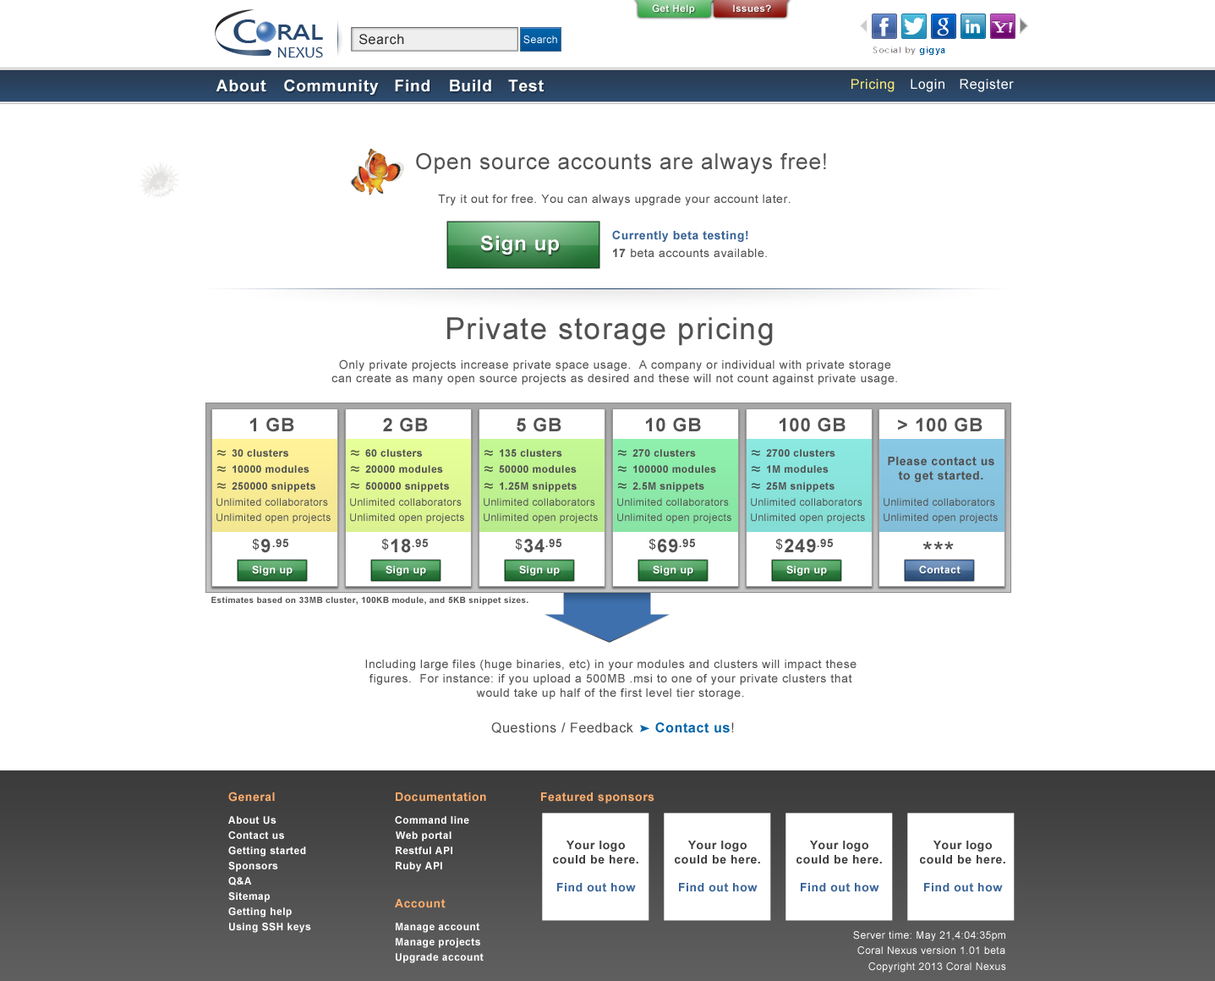
<style>
.page{position:relative;width:1215px;height:981px;background:#ffffff}
.page>*{position:absolute;margin:0}
.t1{font:9.8px "Arial-BoldMT";letter-spacing:0.04em;color:#ffffff}
.t2{font:30.5px "MicrosoftJhengHeiBold";letter-spacing:-0.02em;color:#294970;scale:1.24 1}
.t3{font:20.3px "MicrosoftJhengHeiBold";letter-spacing:-0.02em;color:#294970;scale:1.24 1}
.t4{font:13.5px "ArialMT";letter-spacing:0.04em;color:#2b2b2b}
.t5{font:10.1px "ArialMT";letter-spacing:0.04em;color:#ffffff}
.t6{font:15.8px "Candara";color:#294970}
.t7{font:16.3px "Arial-BoldMT";letter-spacing:0.04em;color:#ffffff}
.t8{font:13.5px "ArialMT";letter-spacing:0.04em;color:#ffed75}
.t9{font:13.5px "ArialMT";letter-spacing:0.04em;color:#ffffff}
.t10{font:22px "ArialMT";letter-spacing:0.04em;color:#515151}
.t11{font:11.8px "ArialMT";letter-spacing:0.04em;color:#515151}
.t12{font:11.8px "Arial-BoldMT";letter-spacing:0.04em;color:#396496}
.t13{font:20.3px "Arial-BoldMT";letter-spacing:0.04em;color:#ffffff}
.t14{font:11.8px "Arial-BoldMT";letter-spacing:0.04em;color:#515151}
.t15{font:30.4px "ArialMT";letter-spacing:0.04em;color:#515151}
.t16{font:18.6px "Arial-BoldMT";letter-spacing:0.04em;color:#515151}
.t17{font:10.1px "Arial-BoldMT";letter-spacing:0.04em;color:#515151}
.t18{font:10.1px "ArialMT";letter-spacing:0.04em;color:#515151}
.t19{font:13.5px "ArialMT";letter-spacing:0.04em;color:#515151}
.t20{font:11.3px "Arial-BoldMT";letter-spacing:0.04em;color:#515151}
.t21{font:25.4px "ArialMT";letter-spacing:0.04em;color:#515151}
.t22{font:10.4px "Arial-BoldMT";letter-spacing:0.04em;color:#ffffff}
.t23{font:8.5px "Arial-BoldMT";letter-spacing:0.04em;color:#555555}
.t24{font:13.5px "Arial-BoldMT";letter-spacing:0.04em;color:#0264a8}
.t25{font:11.8px "Arial-BoldMT";letter-spacing:0.04em;color:#ffad6c}
.t26{font:11.8px "Arial-BoldMT";letter-spacing:0.04em;color:#ffad6b}
.t27{font:10.1px "Arial-BoldMT";letter-spacing:0.04em;color:#ffffff}
.t28{font:11.8px "Arial-BoldMT";letter-spacing:0.04em;color:#404040}
.t29{font:11.8px "Arial-BoldMT";letter-spacing:0.04em;color:#3a6599}
</style>
<div class="page">
<p class="t1" style="left:652px;top:4px;width:43px;height:10px">Get Help</p>
<p class="t1" style="left:733px;top:4px;width:38px;height:8px">Issues?</p>
<p class="t2" style="left:233px;top:19px;width:23px;height:24px">C</p>
<p class="t3" style="left:278px;top:25px;width:45px;height:15px">RAL</p>
<p class="t4" style="left:359px;top:34px;width:45px;height:11px">Search</p>
<p class="t5" style="left:524px;top:36px;width:33px;height:8px">Search</p>
<p class="t6" style="left:277px;top:47px;width:46px;height:11px">NEXUS</p>
<p class="t7" style="left:216px;top:80px;width:50px;height:12px">About</p>
<p class="t7" style="left:284px;top:80px;width:95px;height:15px">Community</p>
<p class="t7" style="left:395px;top:80px;width:35px;height:12px">Find</p>
<p class="t7" style="left:450px;top:80px;width:41px;height:12px">Build</p>
<p class="t7" style="left:508px;top:80px;width:36px;height:12px">Test</p>
<p class="t8" style="left:852px;top:79px;width:43px;height:13px">Pricing</p>
<p class="t9" style="left:911px;top:79px;width:34px;height:13px">Login</p>
<p class="t9" style="left:960px;top:79px;width:54px;height:13px">Register</p>
<p class="t10" style="left:416px;top:153px;width:410px;height:21px">Open source accounts are always free!</p>
<p class="t11" style="left:438px;top:195px;width:353px;height:11px">Try it out for free. You can always upgrade your account later.</p>
<p class="t12" style="left:612px;top:230px;width:137px;height:12px">Currently beta testing!</p>
<p class="t13" style="left:480px;top:235px;width:79px;height:20px">Sign up</p>
<p class="t11" style="left:613px;top:249px;width:154px;height:8px"><span class="t14">17</span> beta accounts available.</p>
<p class="t15" style="left:447px;top:317px;width:326px;height:29px">Private storage pricing</p>
<p class="t11" style="left:332px;top:359px;width:565px;height:26px;text-align:center">Only private projects increase private space usage.  A company or individual with private storage can create as many open source projects as desired and these will not count against private usage.</p>
<p class="t16" style="left:250px;top:418px;width:44px;height:14px">1 GB</p>
<p class="t16" style="left:383px;top:418px;width:45px;height:14px">2 GB</p>
<p class="t16" style="left:517px;top:418px;width:45px;height:14px">5 GB</p>
<p class="t16" style="left:646px;top:418px;width:55px;height:14px">10 GB</p>
<p class="t16" style="left:780px;top:418px;width:66px;height:14px">100 GB</p>
<p class="t16" style="left:898px;top:418px;width:85px;height:14px">&gt; 100 GB</p>
<p class="t17" style="left:232px;top:449px;width:56px;height:8px">30 clusters</p>
<p class="t17" style="left:365px;top:449px;width:57px;height:8px">60 clusters</p>
<p class="t17" style="left:500px;top:449px;width:62px;height:8px">135 clusters</p>
<p class="t17" style="left:633px;top:449px;width:63px;height:8px">270 clusters</p>
<p class="t17" style="left:766px;top:449px;width:70px;height:8px">2700 clusters</p>
<p class="t14" style="left:888px;top:457px;width:107px;height:25px;text-align:center">Please contact us to get started.</p>
<p class="t17" style="left:233px;top:465px;width:77px;height:8px">10000 modules</p>
<p class="t17" style="left:365px;top:465px;width:78px;height:8px">20000 modules</p>
<p class="t17" style="left:499px;top:465px;width:78px;height:8px">50000 modules</p>
<p class="t17" style="left:633px;top:465px;width:83px;height:8px">100000 modules</p>
<p class="t17" style="left:767px;top:465px;width:62px;height:8px">1M modules</p>
<p class="t17" style="left:232px;top:482px;width:83px;height:10px">250000 snippets</p>
<p class="t17" style="left:365px;top:482px;width:84px;height:10px">500000 snippets</p>
<p class="t17" style="left:500px;top:482px;width:77px;height:10px">1.25M snippets</p>
<p class="t17" style="left:633px;top:482px;width:72px;height:10px">2.5M snippets</p>
<p class="t17" style="left:766px;top:482px;width:69px;height:10px">25M snippets</p>
<p class="t18" style="left:217px;top:498px;width:111px;height:9px">Unlimited collaborators</p>
<p class="t18" style="left:350px;top:498px;width:112px;height:9px">Unlimited collaborators</p>
<p class="t18" style="left:484px;top:498px;width:111px;height:9px">Unlimited collaborators</p>
<p class="t18" style="left:617px;top:498px;width:112px;height:9px">Unlimited collaborators</p>
<p class="t18" style="left:751px;top:498px;width:112px;height:9px">Unlimited collaborators</p>
<p class="t18" style="left:884px;top:498px;width:111px;height:9px">Unlimited collaborators</p>
<p class="t18" style="left:217px;top:513px;width:114px;height:11px">Unlimited open projects</p>
<p class="t18" style="left:350px;top:513px;width:114px;height:11px">Unlimited open projects</p>
<p class="t18" style="left:484px;top:513px;width:114px;height:11px">Unlimited open projects</p>
<p class="t18" style="left:617px;top:513px;width:115px;height:11px">Unlimited open projects</p>
<p class="t18" style="left:751px;top:513px;width:114px;height:11px">Unlimited open projects</p>
<p class="t18" style="left:884px;top:513px;width:114px;height:11px">Unlimited open projects</p>
<p class="t19" style="left:252px;top:539px;width:8px;height:12px">$</p>
<p class="t16" style="left:261px;top:539px;width:10px;height:14px">9</p>
<p class="t20" style="left:272px;top:539px;width:16px;height:8px">.95</p>
<p class="t19" style="left:381px;top:539px;width:8px;height:12px">$</p>
<p class="t16" style="left:391px;top:539px;width:20px;height:14px">18</p>
<p class="t20" style="left:412px;top:539px;width:16px;height:8px">.95</p>
<p class="t19" style="left:515px;top:539px;width:8px;height:12px">$</p>
<p class="t16" style="left:524px;top:539px;width:21px;height:14px">34</p>
<p class="t20" style="left:546px;top:539px;width:16px;height:8px">.95</p>
<p class="t19" style="left:649px;top:539px;width:7px;height:12px">$</p>
<p class="t16" style="left:658px;top:539px;width:20px;height:14px">69</p>
<p class="t20" style="left:679px;top:539px;width:16px;height:8px">.95</p>
<p class="t19" style="left:776px;top:539px;width:7px;height:12px">$</p>
<p class="t16" style="left:785px;top:539px;width:31px;height:14px">249</p>
<p class="t20" style="left:817px;top:539px;width:16px;height:8px">.95</p>
<p class="t21" style="left:923px;top:541px;width:31px;height:9px">***</p>
<p class="t22" style="left:252px;top:566px;width:41px;height:10px">Sign up</p>
<p class="t22" style="left:386px;top:566px;width:40px;height:10px">Sign up</p>
<p class="t22" style="left:519px;top:566px;width:41px;height:10px">Sign up</p>
<p class="t22" style="left:653px;top:566px;width:41px;height:10px">Sign up</p>
<p class="t22" style="left:787px;top:566px;width:40px;height:10px">Sign up</p>
<p class="t22" style="left:919px;top:566px;width:42px;height:7px">Contact</p>
<p class="t23" style="left:211px;top:596px;width:318px;height:9px">Estimates based on 33MB cluster, 100KB module, and 5KB snippet sizes.</p>
<p class="t11" style="left:365px;top:660px;width:492px;height:39px;text-align:center">Including large files (huge binaries, etc) in your modules and clusters will impact these figures.  For instance: if you upload a 500MB .msi to one of your private clusters that would take up half of the first level tier storage.</p>
<p class="t19" style="left:491px;top:722px;width:243px;height:11px">Questions / Feedback     <span class="t24">Contact us</span>!</p>
<p class="t25" style="left:228px;top:792px;width:47px;height:10px">General</p>
<p class="t26" style="left:396px;top:792px;width:90px;height:10px">Documentation</p>
<p class="t26" style="left:541px;top:792px;width:114px;height:11px">Featured sponsors</p>
<p class="t27" style="left:228px;top:816px;width:49px;height:9px">About Us</p>
<p class="t27" style="left:395px;top:816px;width:74px;height:8px">Command line</p>
<p class="t27" style="left:228px;top:831px;width:56px;height:8px">Contact us</p>
<p class="t27" style="left:396px;top:831px;width:56px;height:11px">Web portal</p>
<p class="t28" style="left:553px;top:841px;width:86px;height:51px;text-align:center">Your logo could be here.<br><br><span class="t29">Find out how</span></p>
<p class="t28" style="left:675px;top:841px;width:85px;height:51px;text-align:center">Your logo could be here.<br><br><span class="t29">Find out how</span></p>
<p class="t28" style="left:797px;top:841px;width:85px;height:51px;text-align:center">Your logo could be here.<br><br><span class="t29">Find out how</span></p>
<p class="t28" style="left:920px;top:841px;width:86px;height:51px;text-align:center">Your logo could be here.<br><br><span class="t29">Find out how</span></p>
<p class="t27" style="left:228px;top:847px;width:78px;height:10px">Getting started</p>
<p class="t27" style="left:396px;top:847px;width:56px;height:7px">Restful API</p>
<p class="t27" style="left:228px;top:862px;width:50px;height:10px">Sponsors</p>
<p class="t27" style="left:396px;top:862px;width:46px;height:10px">Ruby API</p>
<p class="t27" style="left:228px;top:877px;width:24px;height:9px">Q&amp;A</p>
<p class="t27" style="left:228px;top:892px;width:42px;height:10px">Sitemap</p>
<p class="t26" style="left:395px;top:899px;width:51px;height:9px">Account</p>
<p class="t27" style="left:228px;top:908px;width:64px;height:10px">Getting help</p>
<p class="t27" style="left:229px;top:923px;width:82px;height:10px">Using SSH keys</p>
<p class="t27" style="left:396px;top:923px;width:84px;height:10px">Manage account</p>
<p class="t27" style="left:396px;top:938px;width:84px;height:10px">Manage projects</p>
<p class="t5" style="left:853px;top:931px;width:153px;height:10px">Server time: May 21,4:04:35pm</p>
<p class="t27" style="left:396px;top:953px;width:88px;height:10px">Upgrade account</p>
<p class="t5" style="left:858px;top:946px;width:148px;height:9px">Coral Nexus version 1.01 beta</p>
<p class="t5" style="left:869px;top:963px;width:137px;height:10px">Copyright 2013 Coral Nexus</p>
</div>
